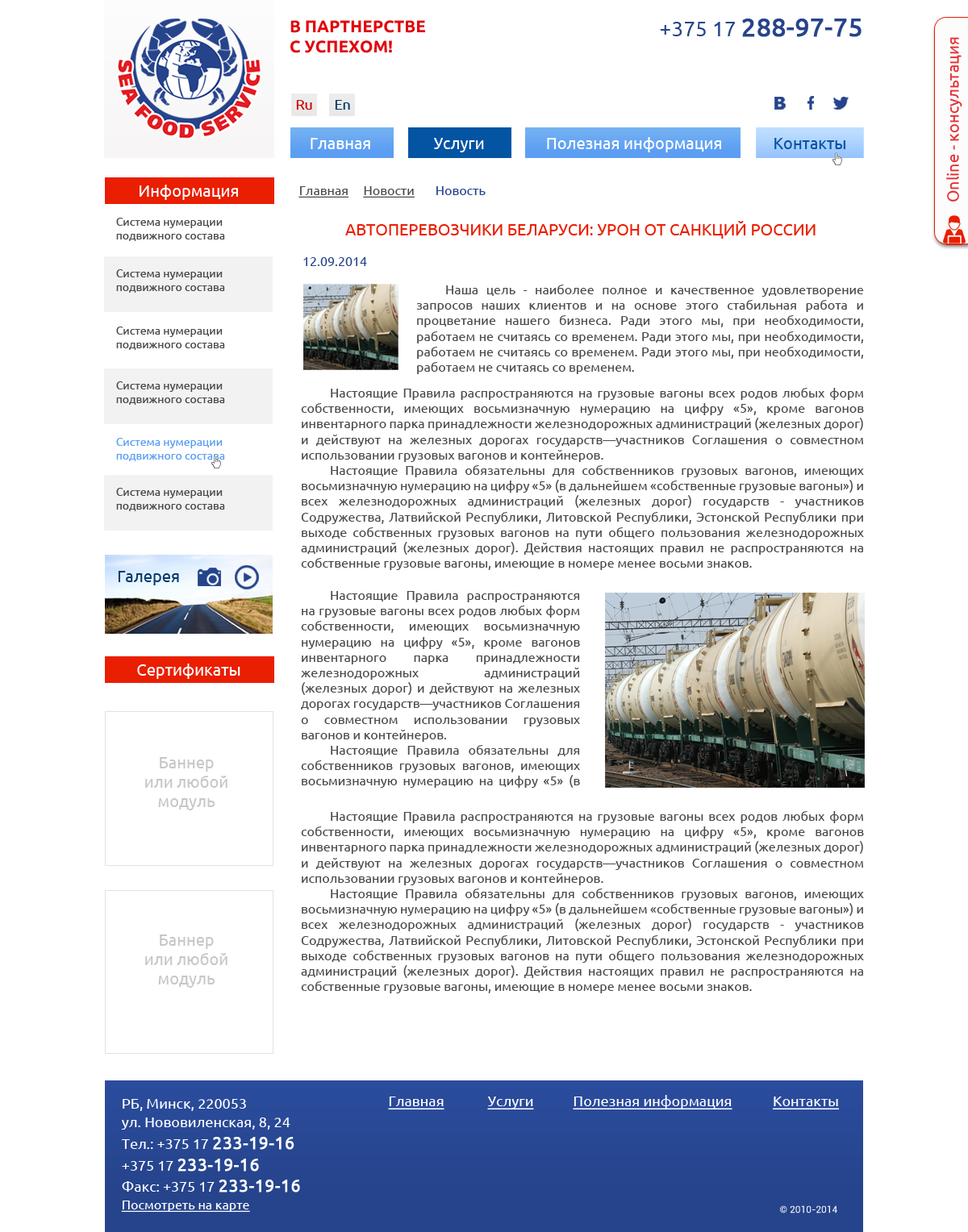
<style>
.page{position:relative;width:968px;height:1232px;background:#ffffff}
.page>*{position:absolute;margin:0}
.t1{font:16.7px "Ubuntu-Bold";color:#e1080e;text-transform:uppercase}
.t2{font:25.4px "Ubuntu";color:#26448c;font-weight:bold}
.t3{font:21.2px "Ubuntu";color:#26448c}
.t4{font:16.1px "Ubuntu";color:#e52b30}
.t5{font:14.1px "Ubuntu";color:#cc0000}
.t6{font:14.1px "Ubuntu";color:#003366}
.t7{font:16.1px "Ubuntu";color:#ffffff}
.t8{font:16.1px "Ubuntu";color:#0354a3}
.t9{font:12.9px "Ubuntu";color:#4a4a4a;text-decoration:underline}
.t10{font:12.9px "Ubuntu";color:#26448c}
.t11{font:11.3px "Ubuntu";color:#4a4a4a}
.t12{font:16.1px "Ubuntu";color:#ea1e00;text-transform:uppercase}
.t13{font:12.9px "Ubuntu";color:#4a4a4a}
.t14{font:11.3px "Ubuntu";color:#5c9ef3}
.t15{font:16.1px "Ubuntu";color:#03386c}
.t16{font:16.1px "Ubuntu";color:#c7c7c7}
.t17{font:14.5px "Ubuntu";color:#ffffff;text-decoration:underline}
.t18{font:14.5px "Ubuntu";color:#ffffff}
.t19{font:14.4px "Ubuntu";color:#ffffff}
.t20{font:17.3px "Ubuntu";color:#ffffff;font-weight:bold}
.t21{font:12.9px "Ubuntu";color:#ffffff;text-decoration:underline}
.t22{font:9.7px "Roboto-Regular";color:#ffffff}
</style>
<div class="page">
<p class="t1" style="left:290px;top:20px;width:135px;height:33px">В партнерстве<br>с успехом!</p>
<p class="t2" style="left:660px;top:19px;width:201px;height:18px"><span class="t3">+375 17 </span>288-97-75</p>
<p class="t4" style="left:946px;top:37px;width:16px;height:165px;rotate:-90deg">Online - консультация</p>
<p class="t5" style="left:296px;top:100px;width:16px;height:10px">Ru</p>
<p class="t6" style="left:335px;top:100px;width:15px;height:10px">En</p>
<p class="t7" style="left:310px;top:138px;width:60px;height:11px">Главная</p>
<p class="t7" style="left:434px;top:138px;width:50px;height:14px">Услуги</p>
<p class="t7" style="left:547px;top:137px;width:174px;height:15px">Полезная информация</p>
<p class="t8" style="left:774px;top:138px;width:71px;height:11px">Контакты</p>
<p class="t7" style="left:140px;top:185px;width:98px;height:15px">Информация</p>
<p class="t9" style="left:298px;top:186px;width:187px;height:12px">Главная     Новости       <span class="t10">Новость</span></p>
<p class="t11" style="left:116px;top:218px;width:109px;height:23px">Система нумерации подвижного состава</p>
<p class="t12" style="left:345px;top:221px;width:470px;height:18px">Автоперевозчики Беларуси: урон от санкций России</p>
<p class="t10" style="left:303px;top:257px;width:64px;height:9px">12.09.2014</p>
<p class="t11" style="left:116px;top:269px;width:109px;height:24px">Система нумерации подвижного состава</p>
<p class="t13" style="left:416px;top:285px;width:448px;height:89px;text-align:justify">Наша цель - наиболее полное и качественное удовлетворение запросов наших клиентов и на основе этого стабильная работа и процветание нашего бизнеса. Ради этого мы, при необходимости, работаем не считаясь со временем. Ради этого мы, при необходимости, работаем не считаясь со временем. Ради этого мы, при необходимости, работаем не считаясь со временем.</p>
<p class="t11" style="left:116px;top:327px;width:109px;height:23px">Система нумерации подвижного состава</p>
<p class="t11" style="left:116px;top:381px;width:109px;height:24px">Система нумерации подвижного состава</p>
<p class="t13" style="left:301px;top:388px;width:563px;height:182px;text-align:justify">Настоящие Правила распространяются на грузовые вагоны всех родов любых форм собственности, имеющих восьмизначную нумерацию на цифру «5», кроме вагонов инвентарного парка принадлежности железнодорожных администраций (железных дорог) и действуют на железных дорогах государств—участников Соглашения о совместном использовании грузовых вагонов и контейнеров.<br> Настоящие Правила обязательны для собственников грузовых вагонов, имеющих восьмизначную нумерацию на цифру «5» (в дальнейшем «собственные грузовые вагоны») и всех железнодорожных администраций (железных дорог) государств - участников Содружества, Латвийской Республики, Литовской Республики, Эстонской Республики при выходе собственных грузовых вагонов на пути общего пользования железнодорожных администраций (железных дорог). Действия настоящих правил не распространяются на собственные грузовые вагоны, имеющие в номере менее восьми знаков.</p>
<p class="t14" style="left:116px;top:438px;width:109px;height:23px">Система нумерации подвижного состава</p>
<p class="t11" style="left:116px;top:488px;width:109px;height:23px">Система нумерации подвижного состава</p>
<p class="t15" style="left:118px;top:571px;width:61px;height:14px">Галерея</p>
<p class="t13" style="left:301px;top:591px;width:279px;height:197px;text-align:justify">Настоящие Правила распространяются на грузовые вагоны всех родов любых форм собственности, имеющих восьмизначную нумерацию на цифру «5», кроме вагонов инвентарного парка принадлежности железнодорожных администраций (железных дорог) и действуют на железных дорогах государств—участников Соглашения о совместном использовании грузовых вагонов и контейнеров.<br> Настоящие Правила обязательны для собственников грузовых вагонов, имеющих восьмизначную нумерацию на цифру «5» (в дальнейшем «собственные грузовые вагоны») и всех железнодорожных администраций (железных дорог) государств - участников Содружества, Латвийской Республики, Литовской Республики, Эстонской Республики при выходе собственных грузовых вагонов на пути общего пользования железнодорожных администраций (железных дорог). Действия настоящих правил не распространяются на собственные грузовые вагоны, имеющие в номере менее восьми знаков.</p>
<p class="t7" style="left:137px;top:664px;width:103px;height:15px">Сертификаты</p>
<p class="t16" style="left:145px;top:757px;width:82px;height:53px;text-align:center">Баннер<br>или любой<br>модуль</p>
<p class="t13" style="left:301px;top:811px;width:563px;height:183px;text-align:justify">Настоящие Правила распространяются на грузовые вагоны всех родов любых форм собственности, имеющих восьмизначную нумерацию на цифру «5», кроме вагонов инвентарного парка принадлежности железнодорожных администраций (железных дорог) и действуют на железных дорогах государств—участников Соглашения о совместном использовании грузовых вагонов и контейнеров.<br> Настоящие Правила обязательны для собственников грузовых вагонов, имеющих восьмизначную нумерацию на цифру «5» (в дальнейшем «собственные грузовые вагоны») и всех железнодорожных администраций (железных дорог) государств - участников Содружества, Латвийской Республики, Литовской Республики, Эстонской Республики при выходе собственных грузовых вагонов на пути общего пользования железнодорожных администраций (железных дорог). Действия настоящих правил не распространяются на собственные грузовые вагоны, имеющие в номере менее восьми знаков.</p>
<p class="t16" style="left:145px;top:935px;width:82px;height:53px;text-align:center">Баннер<br>или любой<br>модуль</p>
<p class="t17" style="left:388px;top:1097px;width:56px;height:13px">Главная</p>
<p class="t17" style="left:487px;top:1097px;width:47px;height:13px">Услуги</p>
<p class="t17" style="left:573px;top:1095px;width:159px;height:15px">Полезная информация</p>
<p class="t17" style="left:773px;top:1097px;width:66px;height:13px">Контакты</p>
<p class="t18" style="left:123px;top:1099px;width:123px;height:12px">РБ, Минск, 220053</p>
<p class="t18" style="left:121px;top:1118px;width:169px;height:12px">ул. Нововиленская, 8, 24</p>
<p class="t19" style="left:121px;top:1137px;width:173px;height:13px">Тел.: +375 17 <span class="t20">233-19-16</span></p>
<p class="t20" style="left:122px;top:1159px;width:137px;height:13px"><span class="t19">+375 17 </span>233-19-16</p>
<p class="t19" style="left:122px;top:1180px;width:178px;height:13px">Факс: +375 17 <span class="t20">233-19-16</span></p>
<p class="t21" style="left:121px;top:1201px;width:129px;height:11px">Посмотреть на карте</p>
<p class="t22" style="left:780px;top:1206px;width:57px;height:8px">© 2010-2014</p>
</div>
